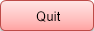
<style>
.page{position:relative;width:94px;height:31px}
.page>*{position:absolute;margin:0}
.t1{font:13.3px "ArialMT";color:#000000}
</style>
<div class="page">
<p class="t1" style="left:36px;top:11px;width:25px;height:11px">Quit</p>
</div>
